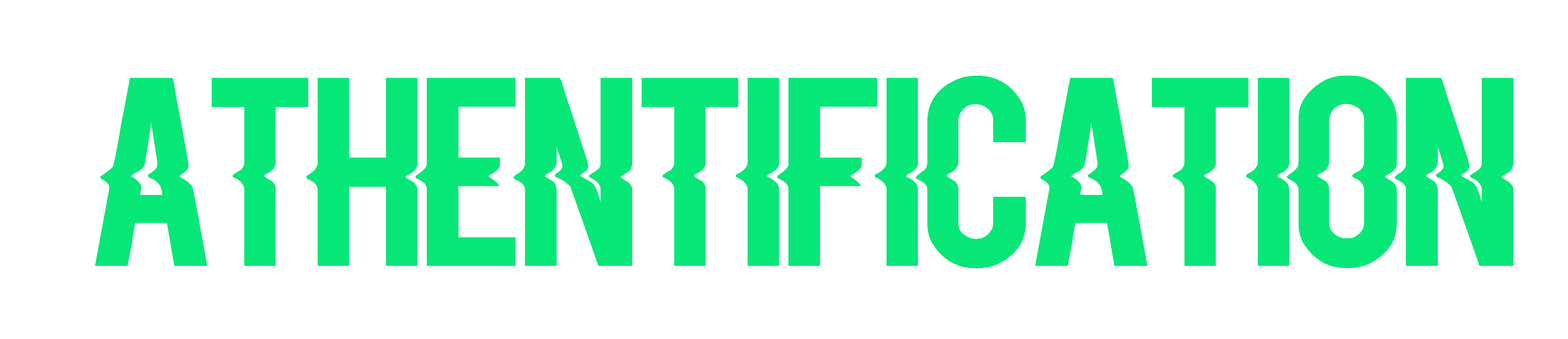
<style>
.page{position:relative;width:1568px;height:339px;background:#ffffff}
.page>*{position:absolute;margin:0}
.t1{font:181.8px "Blacklisted";color:#07e777;scale:1.09 1}
</style>
<div class="page">
<p class="t1" style="left:95px;top:76px;width:1418px;height:192px">Athentification</p>
</div>
